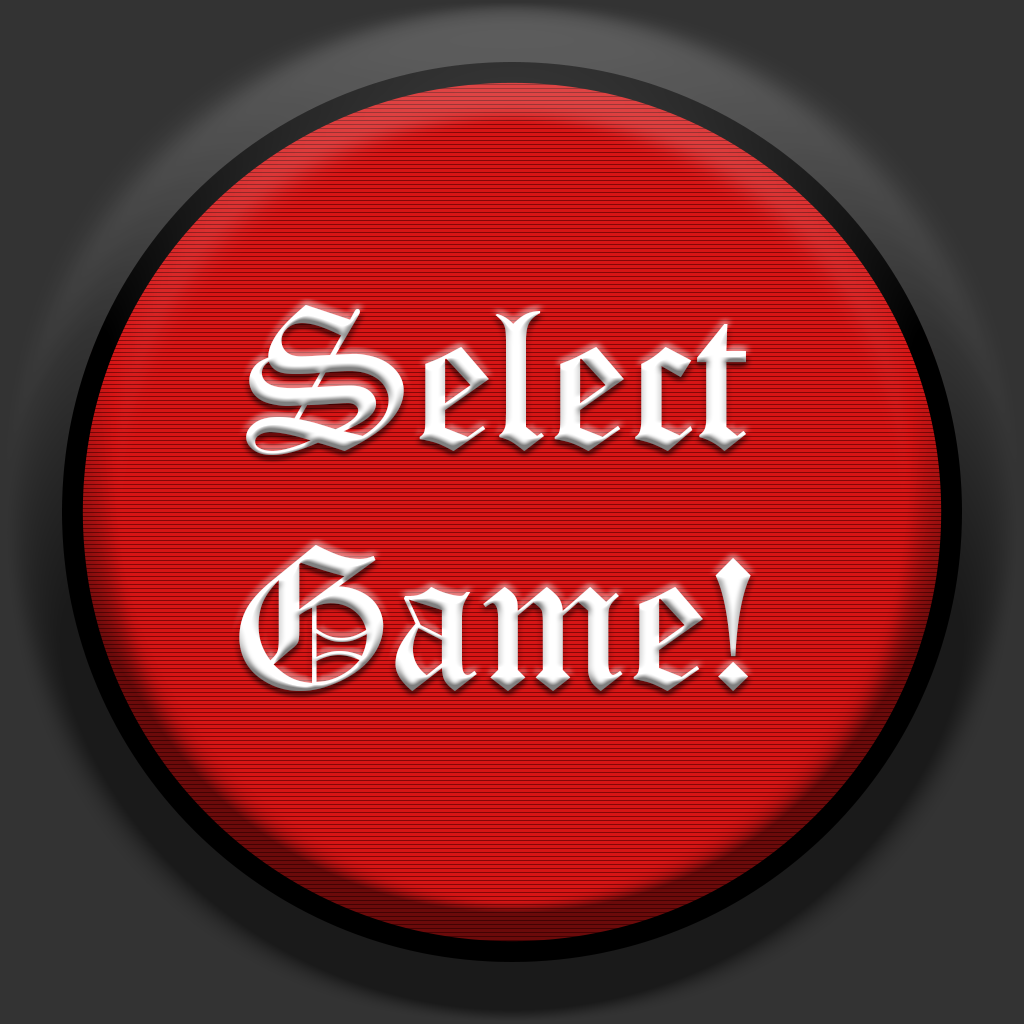
<style>
.page{position:relative;width:1024px;height:1024px;background:#840707}
.page>*{position:absolute;margin:0}
.t1{font:200px "OldEnglishTextMT";color:#ffffff}
</style>
<div class="page">
<p class="t1" style="left:239px;top:305px;width:512px;height:386px;text-align:center">Select<br>Game!</p>
</div>
